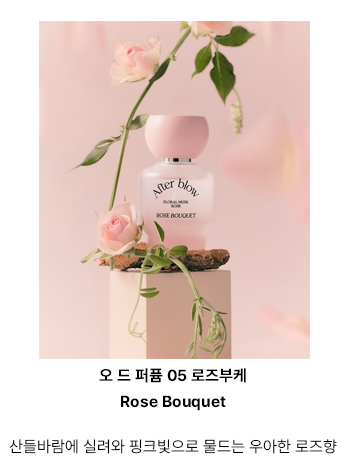
<style>
.page{position:relative;width:346px;height:473px;background:#ffffff}
.page>*{position:absolute;margin:0}
.t1{font:16px/26px "Pretendard-Bold";letter-spacing:0.01em;color:#000000}
.t2{font:16px/30px "Pretendard-Bold";letter-spacing:0.01em;color:#000000}
.t3{font:16px/15px "Pretendard-Light";letter-spacing:0.01em;color:#000000}
.t4{font:16px/30px "Pretendard-Light";letter-spacing:0.01em;color:#000000}
.t5{font:18px/80px "Pretendard-Regular";letter-spacing:0.1em;color:#000000}
</style>
<div class="page">
<p class="t1" style="left:9px;top:368px;width:328px;height:86px;text-align:center"><span class="t2">오 드 </span>퍼퓸 05 로즈부케<br>Rose Bouquet<br><br><span class="t3">산들바람에 실려와 핑크빛으로 물드는 </span><span class="t4">우아한 로즈향<br></span><span class="t5">R<br>R</span></p>
</div>
